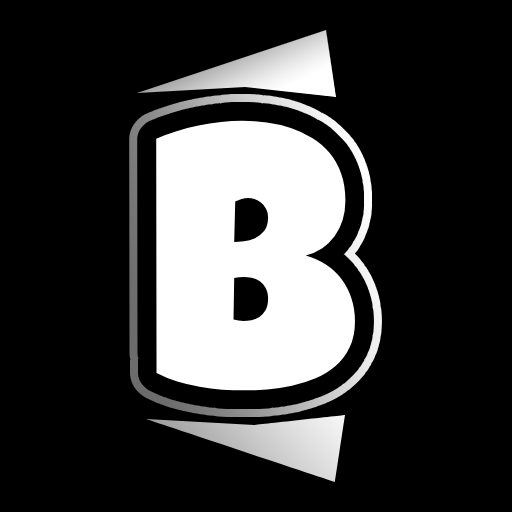
<style>
.page{position:relative;width:512px;height:512px;background:#000000}
.page>*{position:absolute;margin:0}
.t1{font:372.5px "LuckiestGuy-Regular";color:#ffffff;scale:0.94 1}
</style>
<div class="page">
<p class="t1" style="left:156px;top:120px;width:199px;height:271px">B</p>
</div>
